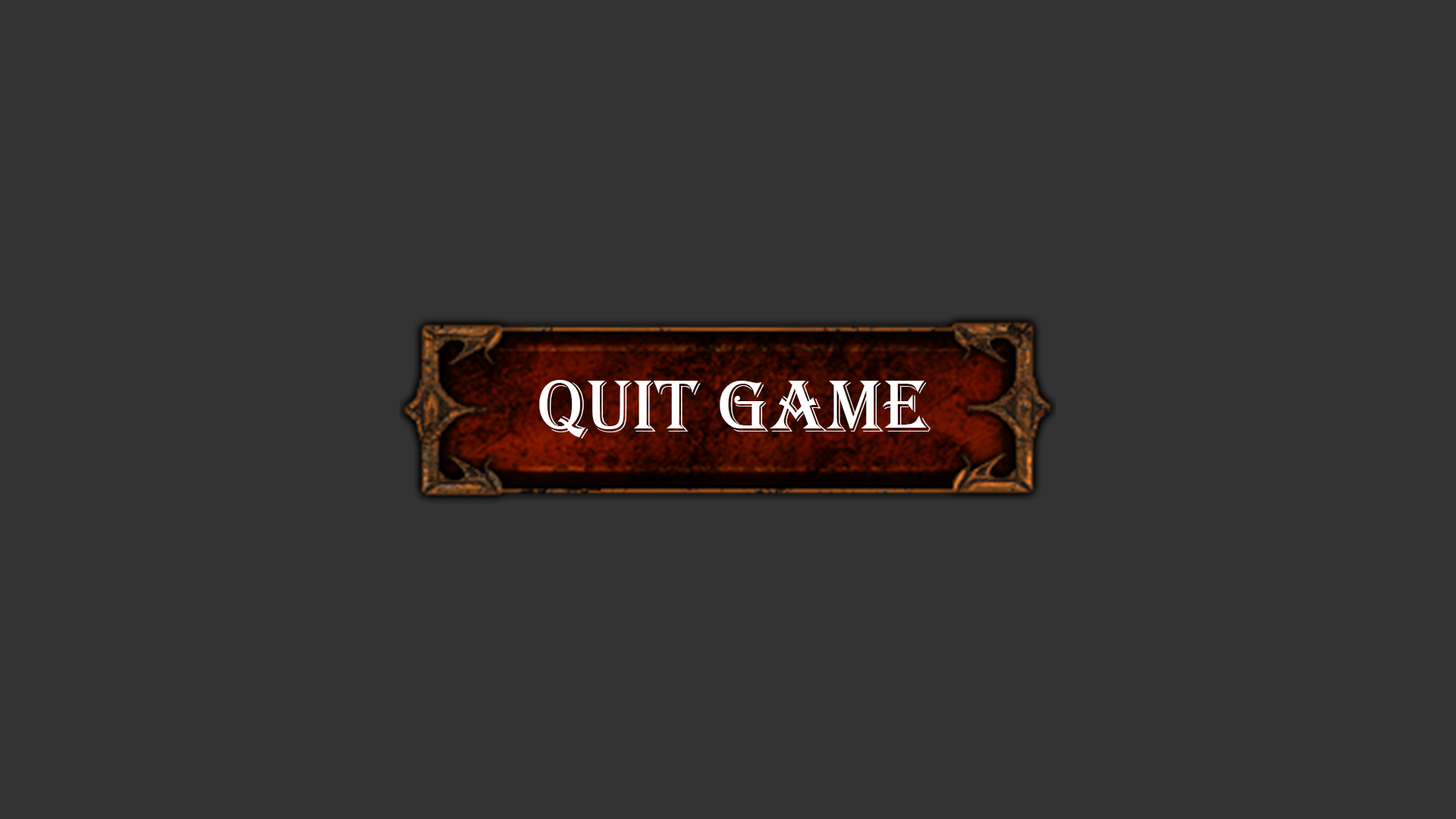
<style>
.page{position:relative;width:1456px;height:819px;background:#333333}
.page>*{position:absolute;margin:0}
.t1{font:75.8px "Algerian";color:#fefefe}
</style>
<div class="page">
<p class="t1" style="left:539px;top:380px;width:391px;height:59px">Quit Game</p>
</div>
